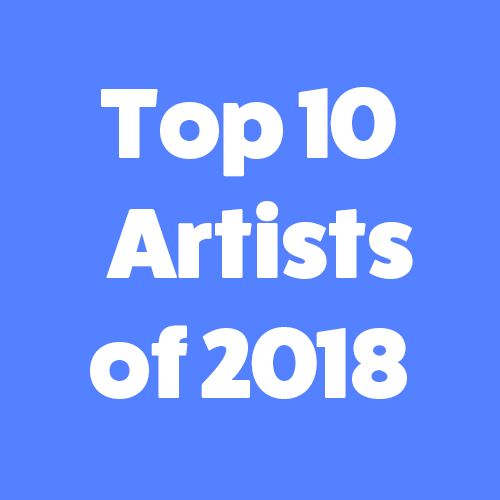
<style>
.page{position:relative;width:500px;height:500px;background:#5381ff}
.page>*{position:absolute;margin:0}
.t1{font:100px "FatFrank-Heavy";color:#ffffff}
</style>
<div class="page">
<p class="t1" style="left:90px;top:87px;width:323px;height:312px;text-align:center">Top 10<br>  Artists<br>of 2018</p>
</div>
